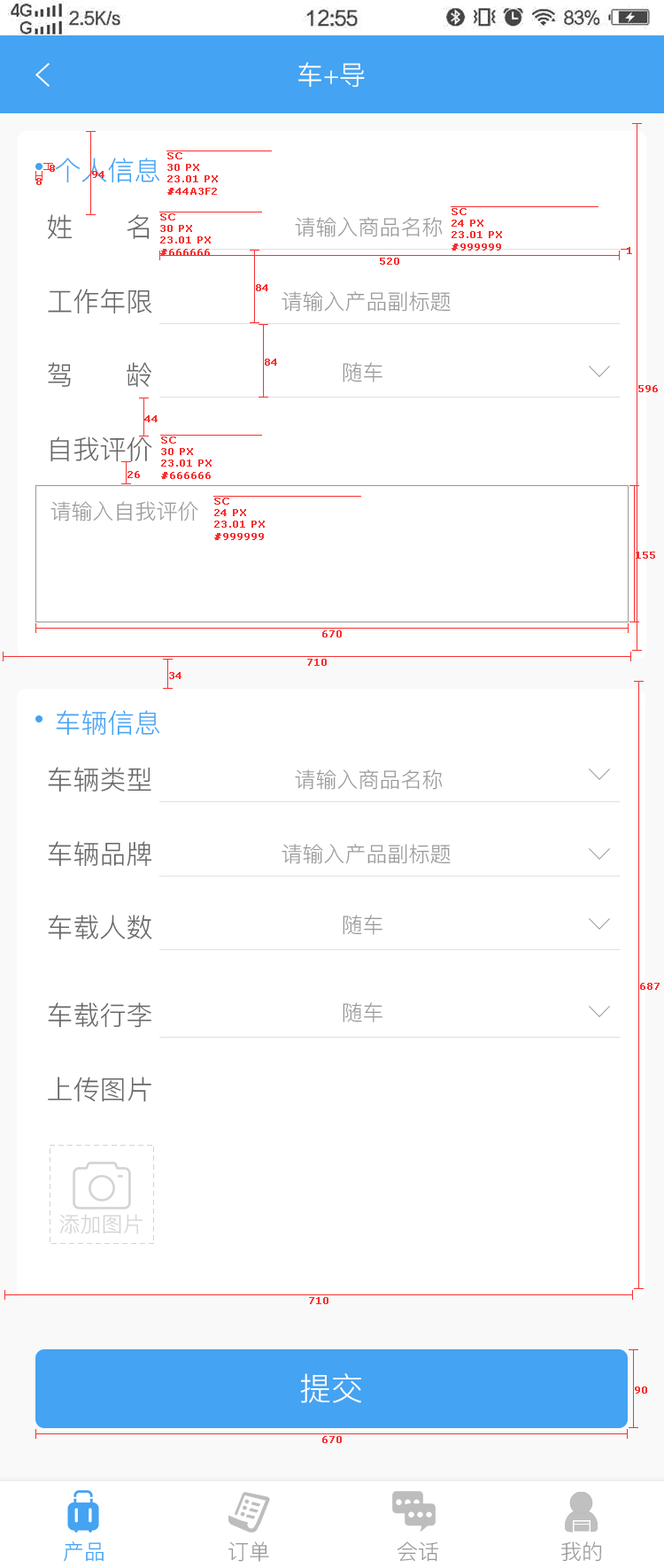
<style>
.page{position:relative;width:664px;height:1568px;background:#ffffff}
.page>*{position:absolute;margin:0}
.t1{font:26.6px "PingFang-SC-Regular";color:#ffffff;text-transform:uppercase}
.t2{font:26.6px "PingFang-SC-Regular";color:#44a3f2;text-transform:uppercase}
.t3{font:9.7px "Verdana";color:#f83030;font-weight:bold}
.t4{font:26.6px "PingFang-SC-Regular";color:#666666;text-transform:uppercase}
.t5{font:21.2px "PingFang-SC-Regular";color:#999999;text-transform:uppercase}
.t6{font:21.2px "PingFang-SC-Regular";color:#d3d3d3;text-transform:uppercase}
.t7{font:31.9px "PingFang-SC-Regular";color:#ffffff;text-transform:uppercase}
.t8{font:21.2px "PingFang-SC-Regular";color:#44a3f2;text-transform:uppercase}
</style>
<div class="page">
<p class="t1" style="left:298px;top:62px;width:67px;height:26px">车+导</p>
<p class="t2" style="left:55px;top:158px;width:105px;height:25px">个人信息</p>
<p class="t3" style="left:167px;top:152px;width:51px;height:43px">SC<br>30 PX<br>23.01 PX<br>#44A3F2</p>
<p class="t3" style="left:50px;top:165px;width:5px;height:7px">8</p>
<p class="t3" style="left:92px;top:171px;width:12px;height:7px">94</p>
<p class="t3" style="left:36px;top:178px;width:6px;height:7px">8</p>
<p class="t3" style="left:452px;top:208px;width:50px;height:43px">SC<br>24 PX<br>23.01 PX<br>#999999</p>
<p class="t4" style="left:47px;top:214px;width:103px;height:25px">姓      名</p>
<p class="t3" style="left:160px;top:213px;width:51px;height:43px">SC<br>30 PX<br>23.01 PX<br>#666666</p>
<p class="t5" style="left:295px;top:217px;width:148px;height:20px">请输入商品名称</p>
<p class="t3" style="left:380px;top:258px;width:19px;height:7px">520</p>
<p class="t3" style="left:627px;top:247px;width:5px;height:7px">1</p>
<p class="t4" style="left:48px;top:289px;width:104px;height:25px">工作年限</p>
<p class="t3" style="left:256px;top:284px;width:12px;height:7px">84</p>
<p class="t5" style="left:282px;top:291px;width:169px;height:21px">请输入产品副标题</p>
<p class="t4" style="left:48px;top:362px;width:103px;height:25px">驾      龄</p>
<p class="t3" style="left:265px;top:359px;width:12px;height:7px">84</p>
<p class="t5" style="left:343px;top:362px;width:39px;height:20px">随车</p>
<p class="t3" style="left:638px;top:385px;width:20px;height:7px">596</p>
<p class="t3" style="left:144px;top:415px;width:14px;height:7px">44</p>
<p class="t4" style="left:50px;top:436px;width:102px;height:26px">自我评价</p>
<p class="t3" style="left:161px;top:436px;width:51px;height:43px">SC<br>30 PX<br>23.01 PX<br>#666666</p>
<p class="t3" style="left:127px;top:471px;width:13px;height:7px">26</p>
<p class="t3" style="left:214px;top:498px;width:51px;height:42px">SC<br>24 PX<br>23.01 PX<br>#999999</p>
<p class="t5" style="left:50px;top:501px;width:148px;height:20px">请输入自我评价</p>
<p class="t3" style="left:636px;top:552px;width:19px;height:7px">155</p>
<p class="t3" style="left:322px;top:630px;width:20px;height:7px">670</p>
<p class="t3" style="left:307px;top:659px;width:20px;height:7px">710</p>
<p class="t3" style="left:169px;top:672px;width:13px;height:7px">34</p>
<p class="t2" style="left:56px;top:710px;width:104px;height:26px">车辆信息</p>
<p class="t4" style="left:48px;top:767px;width:103px;height:25px">车辆类型</p>
<p class="t5" style="left:295px;top:769px;width:148px;height:21px">请输入商品名称</p>
<p class="t4" style="left:48px;top:841px;width:104px;height:26px">车辆品牌</p>
<p class="t5" style="left:282px;top:844px;width:169px;height:20px">请输入产品副标题</p>
<p class="t4" style="left:48px;top:915px;width:104px;height:25px">车载人数</p>
<p class="t5" style="left:343px;top:915px;width:39px;height:20px">随车</p>
<p class="t3" style="left:640px;top:983px;width:20px;height:7px">687</p>
<p class="t4" style="left:48px;top:1002px;width:103px;height:26px">车载行李</p>
<p class="t5" style="left:343px;top:1002px;width:39px;height:21px">随车</p>
<p class="t4" style="left:48px;top:1077px;width:103px;height:25px">上传图片</p>
<p class="t6" style="left:59px;top:1214px;width:84px;height:20px">添加图片</p>
<p class="t3" style="left:309px;top:1297px;width:19px;height:7px">710</p>
<p class="t7" style="left:300px;top:1373px;width:62px;height:30px">提交</p>
<p class="t3" style="left:635px;top:1386px;width:12px;height:8px">90</p>
<p class="t3" style="left:322px;top:1436px;width:20px;height:7px">670</p>
<p class="t8" style="left:64px;top:1541px;width:40px;height:21px">产品</p>
<p class="t5" style="left:228px;top:1541px;width:41px;height:21px">订单</p>
<p class="t5" style="left:398px;top:1541px;width:40px;height:21px">会话</p>
<p class="t5" style="left:561px;top:1541px;width:41px;height:21px">我的</p>
</div>
